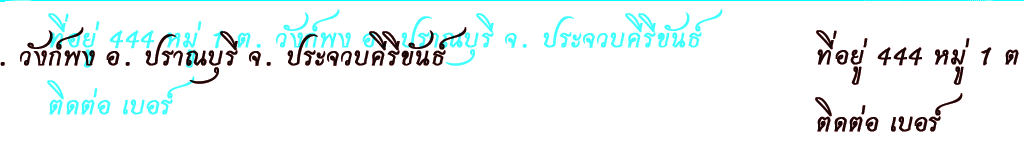
<style>
.page{position:relative;width:1024px;height:150px;background:#ffffff}
.page>*{position:absolute;margin:0}
.t1{font:36px "THCharmonman";font-weight:bold}
.t2{font:36px "THCharmonman";color:#40ffff;font-weight:bold}
</style>
<div class="page">
<p class="t1" style="left:48px;top:8px;width:675px;height:59px">ที่อยู่ 444 หมู่ 1 ต. วังก์พง อ. ปราณบุรี จ. ประจวบคีรีขันธ์</p>
<p class="t2" style="left:47px;top:75px;width:148px;height:39px">ติดต่อ เบอร์</p>
</div>
